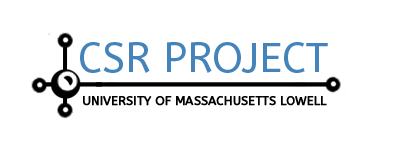
<style>
.page{position:relative;width:400px;height:150px;background:#ffffff}
.page>*{position:absolute;margin:0}
.t1{font:40.9px "ABeeZee-Regular";color:#4484ba}
.t2{font:12.5px "ABeeZee-Regular";color:#000000;font-weight:bold;scale:0.96 1}
</style>
<div class="page">
<p class="t1" style="left:80px;top:42px;width:248px;height:31px">CSR PROJECT</p>
<p class="t2" style="left:83px;top:96px;width:244px;height:10px">UNIVERSITY OF MASSACHUSETTS LOWELL</p>
</div>
